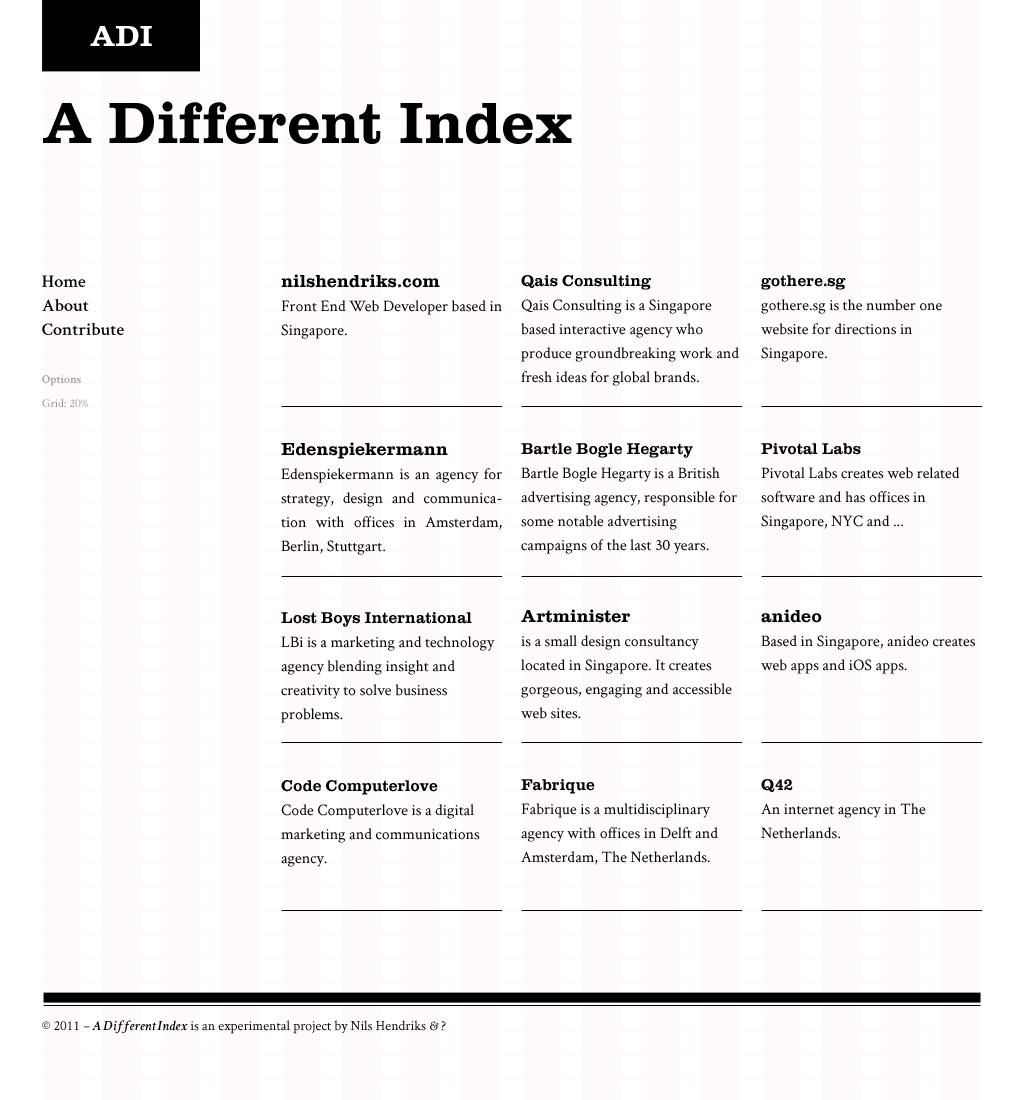
<style>
.page{position:relative;width:1024px;height:1100px;background:#fffbfb}
.page>*{position:absolute;margin:0}
.t1{font:30px "ClarendonFS-Bold";color:#fefefe}
.t2{font:60px "ClarendonFS-Bold";color:#000000}
.t3{font:18px/24px "Crimson-Semibold";color:#000000}
.t4{font:16px/24px "Crimson-Roman";color:#000000}
.t5{font:18px/24px "ClarendonFS-Bold";color:#000000}
.t6{font:16px/24px "ClarendonFS-Bold";color:#000000}
.t7{font:12px/24px "Crimson-Roman";color:#999999}
.t8{font:12px/24px "Crimson-Semibold";color:#999999}
.t9{font:14px "Crimson-Roman";color:#000000}
.t10{font:14px "Crimson-SemiboldItalic";color:#000000}
.t11{font:14px "Crimson-Italic";color:#000000}
</style>
<div class="page">
<p class="t1" style="left:90px;top:26px;width:62px;height:20px">ADI</p>
<p class="t2" style="left:43px;top:101px;width:529px;height:43px">A Different Index</p>
<p class="t3" style="left:42px;top:275px;width:82px;height:60px">Home<br>About<br>Contribute</p>
<p class="t4" style="left:281px;top:274px;width:221px;height:593px"><span class="t5">nilshendriks.com<br></span>Front End Web Developer based in Singapore.<br><br><br><br><br><span class="t5">Edenspiekermann<br></span>Edenspiekermann is an agency for strategy, design and communication with offices in Amsterdam, Berlin, Stuttgart. <br><br><br><span class="t6">Lost Boys International<br></span>LBi is a marketing and technology agency blending insight and creativity to solve business problems.<br><br><br><span class="t6">Code Computerlove<br></span>Code Computerlove is a digital marketing and communications agency.</p>
<p class="t4" style="left:521px;top:275px;width:218px;height:590px"><span class="t6">Qais Consulting<br></span>Qais Consulting is a Singapore based interactive agency who produce groundbreaking work and fresh ideas for global brands.<br><br><br><span class="t6">Bartle Bogle Hegarty<br></span>Bartle Bogle Hegarty is a British advertising agency, responsible for some notable advertising campaigns of the last 30 years.<br><span class="t5"><br><br>Artminister<br></span>is a small design consultancy located in Singapore. It creates gorgeous, engaging and accessible web sites.<br><br><br><span class="t6">Fabrique<br></span>Fabrique is a multidisciplinary agency with offices in Delft and Amsterdam, The Netherlands.</p>
<p class="t4" style="left:761px;top:275px;width:214px;height:564px"><span class="t6">gothere.sg<br></span>gothere.sg is the number one website for directions in Singapore.<br><br><br><span class="t6"><br>Pivotal Labs<br></span>Pivotal Labs creates web related software and has offices in Singapore, NYC and ...<br><span class="t5"><br><br><br>anideo<br></span>Based in Singapore, anideo creates web apps and iOS apps.<br><br><br><br><br><span class="t6">Q42<br></span>An internet agency in The Netherlands.</p>
<p class="t7" style="left:42px;top:375px;width:46px;height:33px"><span class="t8">Options<br></span>Grid: 20%</p>
<p class="t9" style="left:42px;top:1020px;width:404px;height:14px">© 2011 <span class="t10">– A Different Index</span> is an experimental project by Nils Hendriks <span class="t11">&amp;</span> ?</p>
</div>
